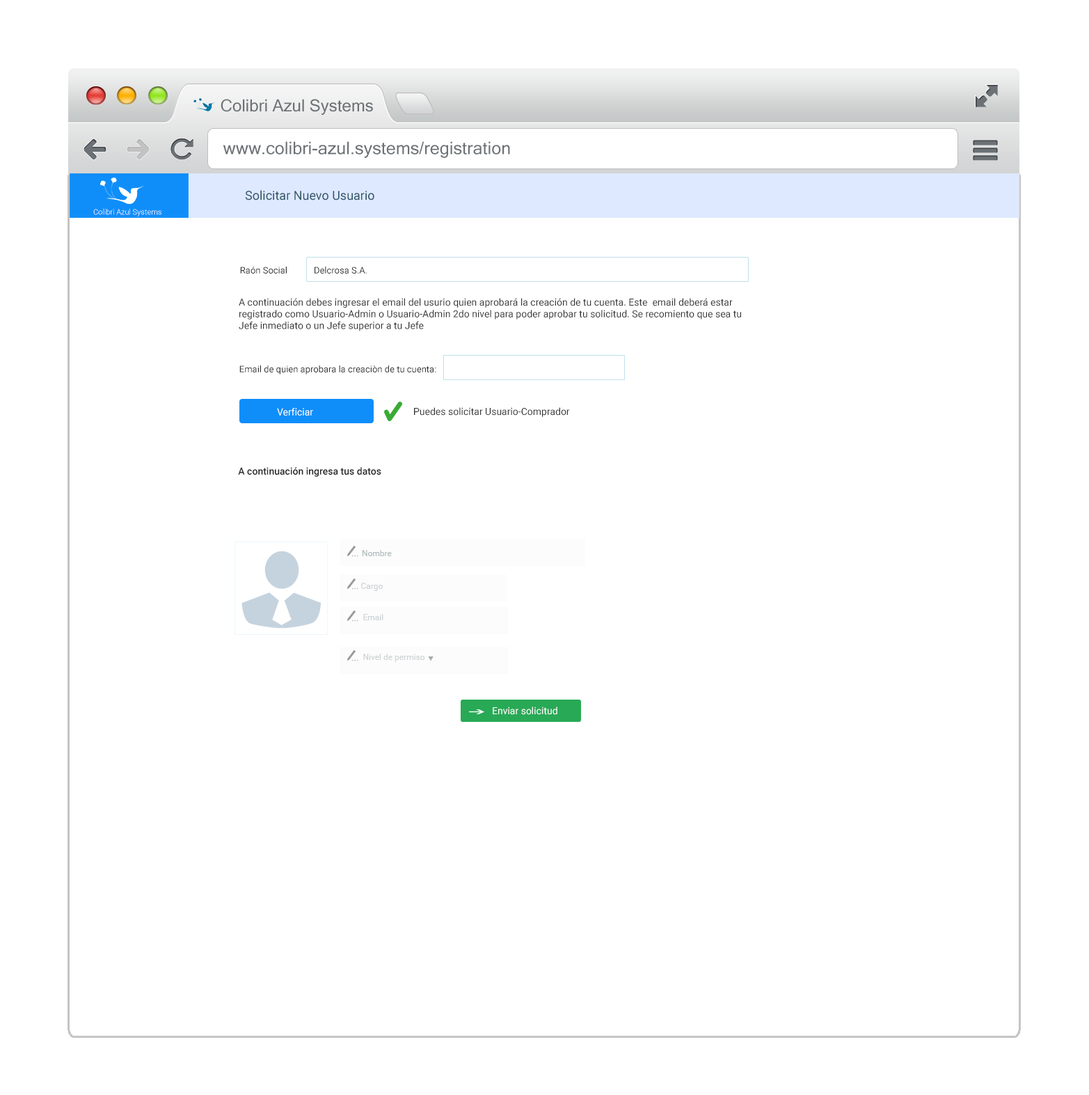
<style>
.page{position:relative;width:1089px;height:1095px;background:#ffffff}
.page>*{position:absolute;margin:0}
.t1{font:16.7px "MicrosoftSansSerif";color:#6b7175}
.t2{font:17.5px "MicrosoftSansSerif";color:#6b7175}
.t3{font:12.5px "Roboto-Regular";color:#32566d}
.t4{font:7.7px "Roboto-Light";color:#ffffff}
.t5{font:9px "Roboto-Regular";color:#333333}
.t6{font:9.7px "Roboto-Regular";color:#333333}
.t7{font:9.7px "Roboto-Regular";color:#ffffff}
.t8{font:9.7px "Roboto-Medium";color:#252626}
.t9{font:8.4px "Roboto-Regular";color:#b1bcbe}
.t10{font:8.4px "Roboto-Regular";color:#cdd4d5}
</style>
<div class="page">
<p class="t1" style="left:221px;top:99px;width:152px;height:16px">Colibri Azul Systems</p>
<p class="t2" style="left:223px;top:141px;width:287px;height:17px">www.colibri-azul.systems/registration</p>
<p class="t3" style="left:245px;top:190px;width:129px;height:10px">Solicitar Nuevo Usuario</p>
<p class="t4" style="left:93px;top:208px;width:68px;height:8px">Colibri Azul Systems</p>
<p class="t5" style="left:240px;top:267px;width:47px;height:7px">Raón Social</p>
<p class="t5" style="left:315px;top:267px;width:52px;height:7px">Delcrosa S.A.</p>
<p class="t6" style="left:239px;top:298px;width:502px;height:33px;text-align:right">A continuación debes ingresar el email del usurio quien aprobará la creación de tu cuenta. Este  email deberá estar registrado como Usuario-Admin o Usuario-Admin 2do nivel para poder aprobar tu solicitud. Se recomiento que sea tu Jefe inmediato o un Jefe superior a tu Jefe</p>
<p class="t5" style="left:239px;top:365px;width:197px;height:9px">Email de quien aprobara la creaciòn de tu cuenta:</p>
<p class="t7" style="left:277px;top:408px;width:36px;height:7px">Verficiar</p>
<p class="t6" style="left:414px;top:407px;width:156px;height:10px">Puedes solicitar Usuario-Comprador</p>
<p class="t8" style="left:238px;top:467px;width:143px;height:10px">A continuación ingresa tus datos</p>
<p class="t9" style="left:362px;top:550px;width:30px;height:6px">Nombre</p>
<p class="t10" style="left:361px;top:583px;width:22px;height:8px">Cargo</p>
<p class="t10" style="left:363px;top:614px;width:20px;height:6px">Email</p>
<p class="t10" style="left:363px;top:654px;width:62px;height:8px">Nivel de permiso</p>
<p class="t7" style="left:493px;top:706px;width:64px;height:9px">Enviar solicitud</p>
</div>
